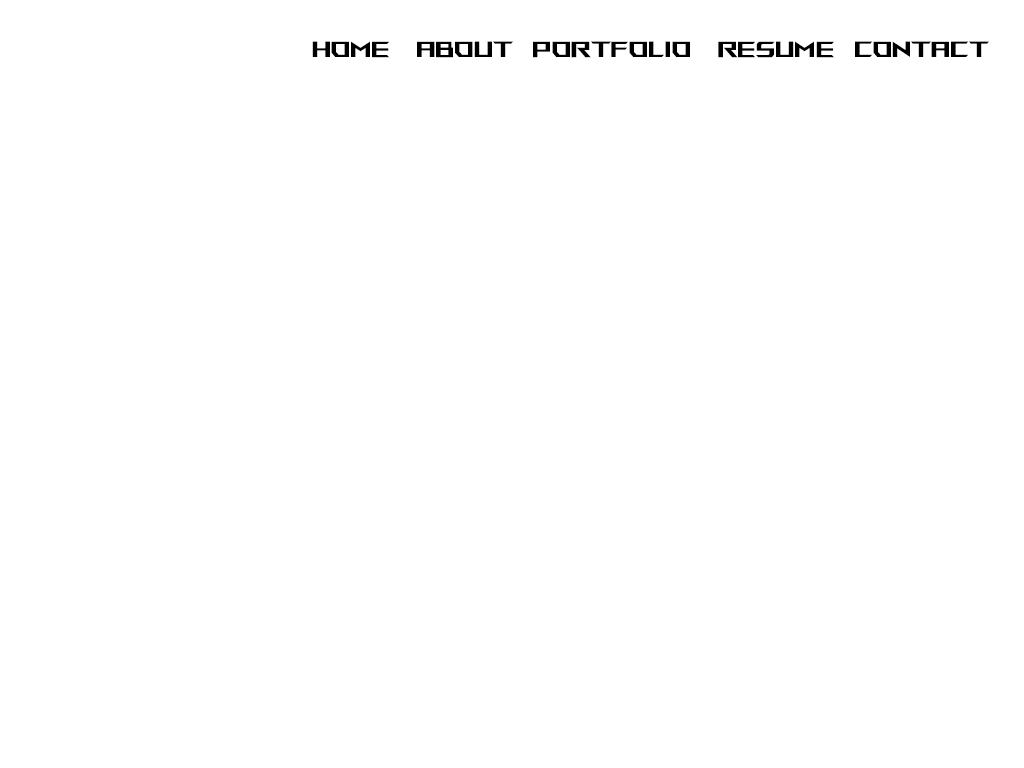
<style>
.page{position:relative;width:1024px;height:768px;background:#ffffff}
.page>*{position:absolute;margin:0}
.t1{font:22px "ROGFonts-Regular";color:#000000}
</style>
<div class="page">
<p class="t1" style="left:312px;top:41px;width:677px;height:17px">Home    about   Portfolio    resume   contact</p>
</div>
